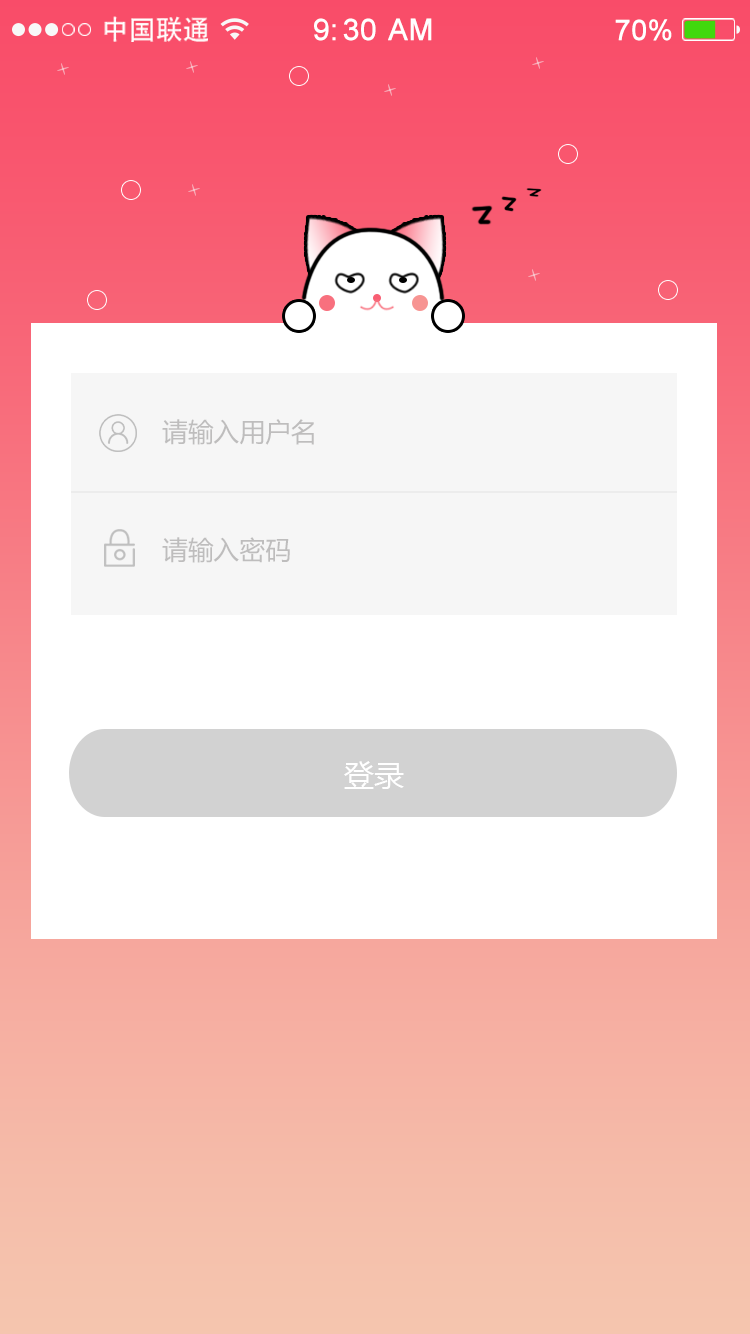
<style>
.page{position:relative;width:750px;height:1334px;background:#ffffff}
.page>*{position:absolute;margin:0}
.t1{font:27.1px "AdobeHeitiStd-Regular";color:#ffffff}
.t2{font:29.5px "ArialMT";color:#ffffff;font-weight:bold}
.t3{font:28.3px "ArialMT";color:#ffffff;font-weight:bold}
.t4{font:26.1px "MicrosoftYaHei";color:#bebdbd}
.t5{font:30px "MicrosoftYaHei";color:#ffffff}
</style>
<div class="page">
<p class="t1" style="left:104px;top:16px;width:104px;height:26px">中国联通</p>
<p class="t2" style="left:314px;top:18px;width:118px;height:23px">9:30 AM</p>
<p class="t3" style="left:615px;top:19px;width:57px;height:22px">70%</p>
<p class="t4" style="left:162px;top:419px;width:152px;height:26px">请输入用户名</p>
<p class="t4" style="left:162px;top:537px;width:128px;height:26px">请输入密码</p>
<p class="t5" style="left:344px;top:761px;width:60px;height:28px">登录</p>
</div>
